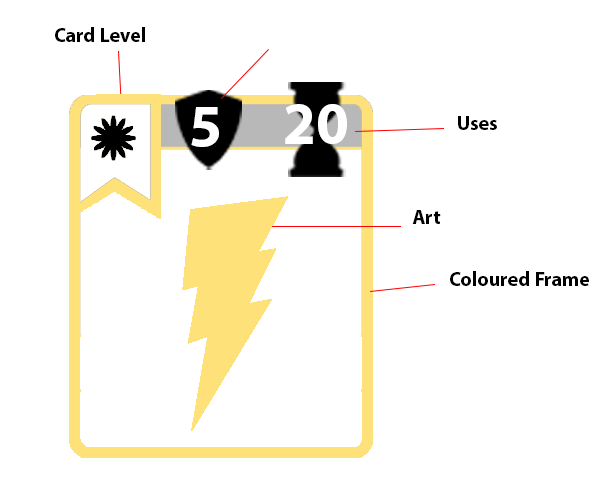
<style>
.page{position:relative;width:598px;height:500px;background:#ffffff}
.page>*{position:absolute;margin:0}
.t1{font:20px "MyriadPro-Bold";color:#000000}
.t2{font:60px "MyriadPro-Bold";color:#ffffff}
</style>
<div class="page">
<p class="t1" style="left:55px;top:27px;width:90px;height:15px">Card Level</p>
<p class="t2" style="left:191px;top:107px;width:28px;height:40px">5</p>
<p class="t2" style="left:285px;top:104px;width:62px;height:40px">20</p>
<p class="t1" style="left:458px;top:116px;width:39px;height:14px">Uses</p>
<p class="t1" style="left:412px;top:210px;width:29px;height:14px">Art</p>
<p class="t1" style="left:450px;top:271px;width:139px;height:15px">Coloured Frame</p>
</div>
